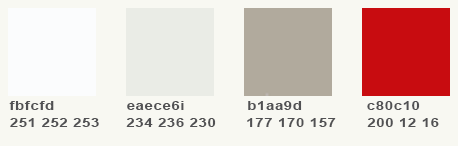
<style>
.page{position:relative;width:458px;height:146px;background:#f8f8f2}
.page>*{position:absolute;margin:0}
.t1{font:12px "Arial-BoldMT";letter-spacing:0.05em;color:#515153;scale:1.23 1}
</style>
<div class="page">
<p class="t1" style="left:9px;top:101px;width:45px;height:9px">fbfcfd</p>
<p class="t1" style="left:127px;top:101px;width:57px;height:9px">eaece6i</p>
<p class="t1" style="left:248px;top:101px;width:54px;height:9px">b1aa9d</p>
<p class="t1" style="left:367px;top:101px;width:53px;height:9px">c80c10</p>
<p class="t1" style="left:10px;top:118px;width:89px;height:9px">251 252 253</p>
<p class="t1" style="left:126px;top:118px;width:90px;height:9px">234 236 230</p>
<p class="t1" style="left:247px;top:118px;width:89px;height:9px">177 170 157</p>
<p class="t1" style="left:367px;top:118px;width:72px;height:9px">200 12 16</p>
</div>
